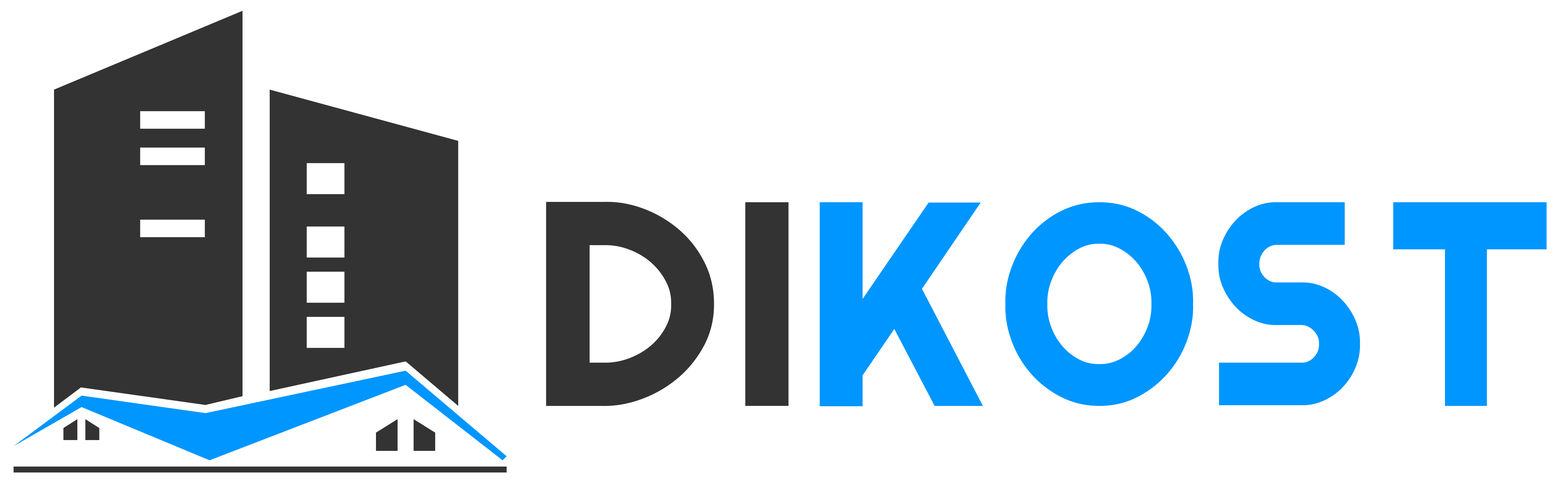
<style>
.page{position:relative;width:1568px;height:484px;background:#ffffff}
.page>*{position:absolute;margin:0}
.t1{font:317.7px "TribbonA";letter-spacing:0.025em;color:#0096ff}
.t2{font:317.7px "TribbonA";letter-spacing:0.025em;color:#333333}
</style>
<div class="page">
<p class="t1" style="left:546px;top:201px;width:1001px;height:205px"><span class="t2">Di</span>KOST</p>
</div>
